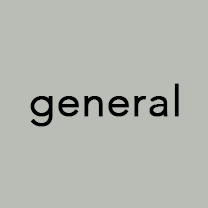
<style>
.page{position:relative;width:208px;height:208px;background:#babdb6}
.page>*{position:absolute;margin:0}
.t1{font:43.3px "Avenir-Light";color:#000000;font-weight:bold}
</style>
<div class="page">
<p class="t1" style="left:30px;top:83px;width:149px;height:44px">general</p>
</div>
